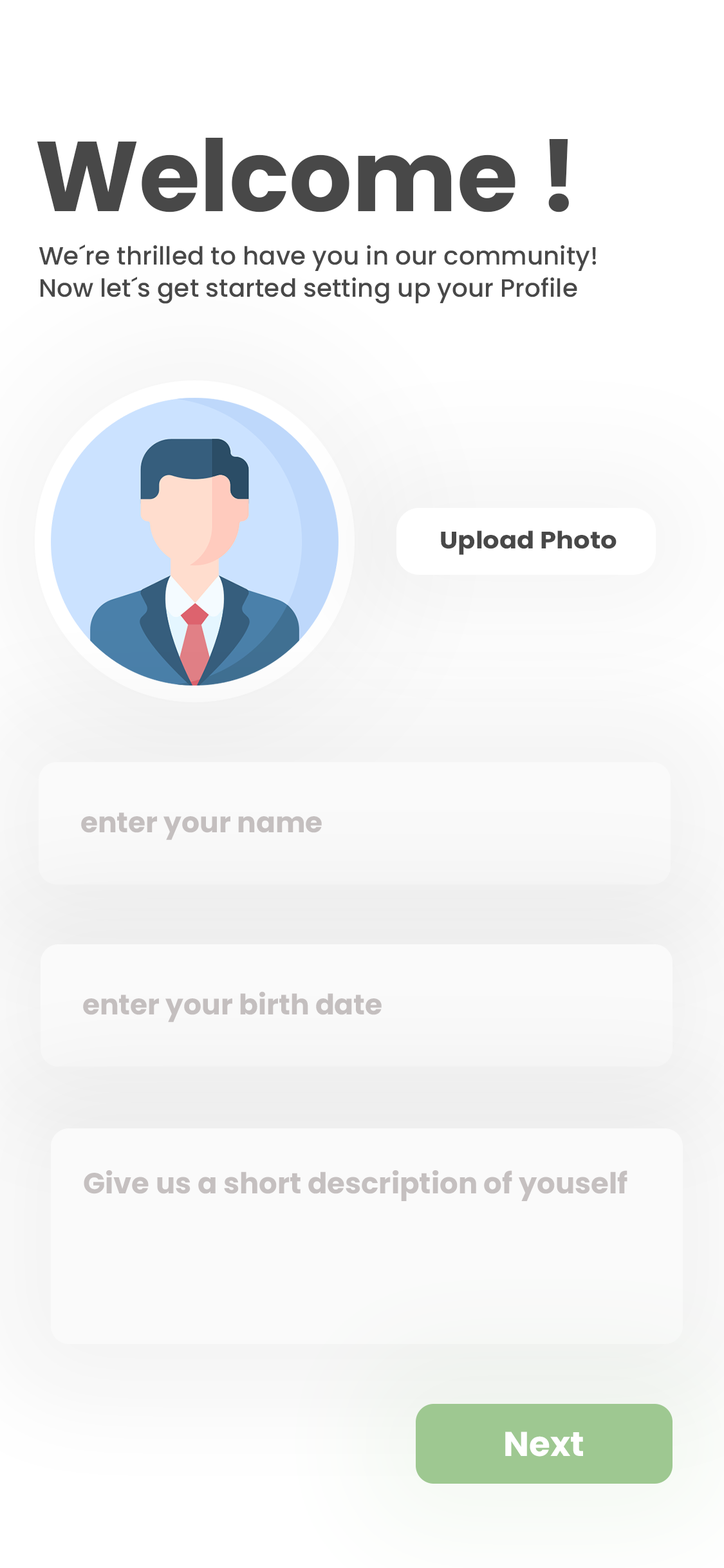
<style>
.page{position:relative;width:724px;height:1568px;background:#ffffff}
.page>*{position:absolute;margin:0}
.t1{font:99.1px "Poppins-Bold";color:#484848}
.t2{font:25.1px/32.2px "Poppins-Medium";color:#484848}
.t3{font:23.9px "Poppins-Bold";color:#484848;scale:1.08 1}
.t4{font:28.3px "Poppins-Bold";color:#c5c0c0}
.t5{font:29px "Poppins-Bold";color:#c5c0c0}
.t6{font:34.3px "Poppins-Bold";color:#ffffff}
</style>
<div class="page">
<p class="t1" style="left:37px;top:138px;width:532px;height:74px">Welcome !</p>
<p class="t2" style="left:39px;top:245px;width:557px;height:59px">We´re thrilled to have you in our community! <br>Now let´s get started setting up your Profile</p>
<p class="t3" style="left:441px;top:530px;width:176px;height:25px">Upload Photo</p>
<p class="t4" style="left:81px;top:812px;width:241px;height:28px">enter your name</p>
<p class="t4" style="left:83px;top:991px;width:299px;height:31px">enter your birth date</p>
<p class="t5" style="left:84px;top:1170px;width:544px;height:31px">Give us a short description of youself</p>
<p class="t6" style="left:505px;top:1432px;width:78px;height:25px">Next</p>
</div>
